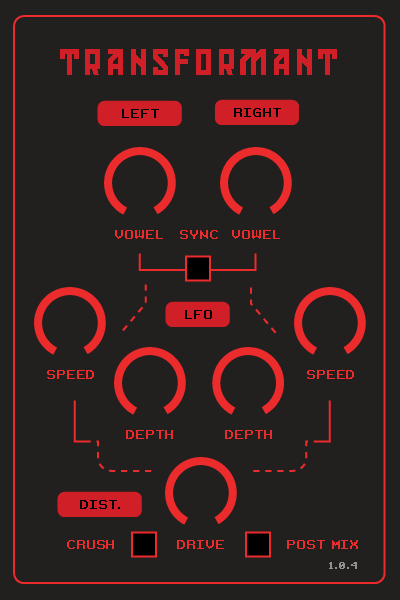
<style>
.page{position:relative;width:400px;height:600px;background:#221f1f}
.page>*{position:absolute;margin:0}
.t1{font:36px "KonstruktorRegular";letter-spacing:0.075em;color:#d11f27}
.t2{font:12px "RetroGaming";letter-spacing:0.075em;color:#000000}
.t3{font:12px "RetroGaming";letter-spacing:0.075em;color:#ec2b2c}
.t4{font:10px "RetroGaming";letter-spacing:0.075em;color:#918f8f}
</style>
<div class="page">
<p class="t1" style="left:60px;top:49px;width:277px;height:26px">TRANSFORMANT</p>
<p class="t2" style="left:122px;top:109px;width:37px;height:9px">LEFT</p>
<p class="t2" style="left:234px;top:108px;width:47px;height:9px">RIGHT</p>
<p class="t3" style="left:115px;top:230px;width:48px;height:9px">VOWEL</p>
<p class="t3" style="left:180px;top:230px;width:38px;height:9px">SYNC</p>
<p class="t3" style="left:232px;top:230px;width:48px;height:9px">VOWEL</p>
<p class="t2" style="left:185px;top:310px;width:27px;height:9px">LFO</p>
<p class="t3" style="left:47px;top:370px;width:47px;height:9px">SPEED</p>
<p class="t3" style="left:307px;top:370px;width:47px;height:9px">SPEED</p>
<p class="t3" style="left:126px;top:430px;width:47px;height:9px">DEPTH</p>
<p class="t3" style="left:225px;top:430px;width:47px;height:9px">DEPTH</p>
<p class="t2" style="left:80px;top:500px;width:40px;height:9px">DIST.</p>
<p class="t3" style="left:67px;top:540px;width:47px;height:9px">CRUSH</p>
<p class="t3" style="left:177px;top:540px;width:47px;height:9px">DRIVE</p>
<p class="t3" style="left:287px;top:540px;width:71px;height:9px">POST MIX</p>
<p class="t4" style="left:329px;top:562px;width:28px;height:7px">1.0.4</p>
</div>
